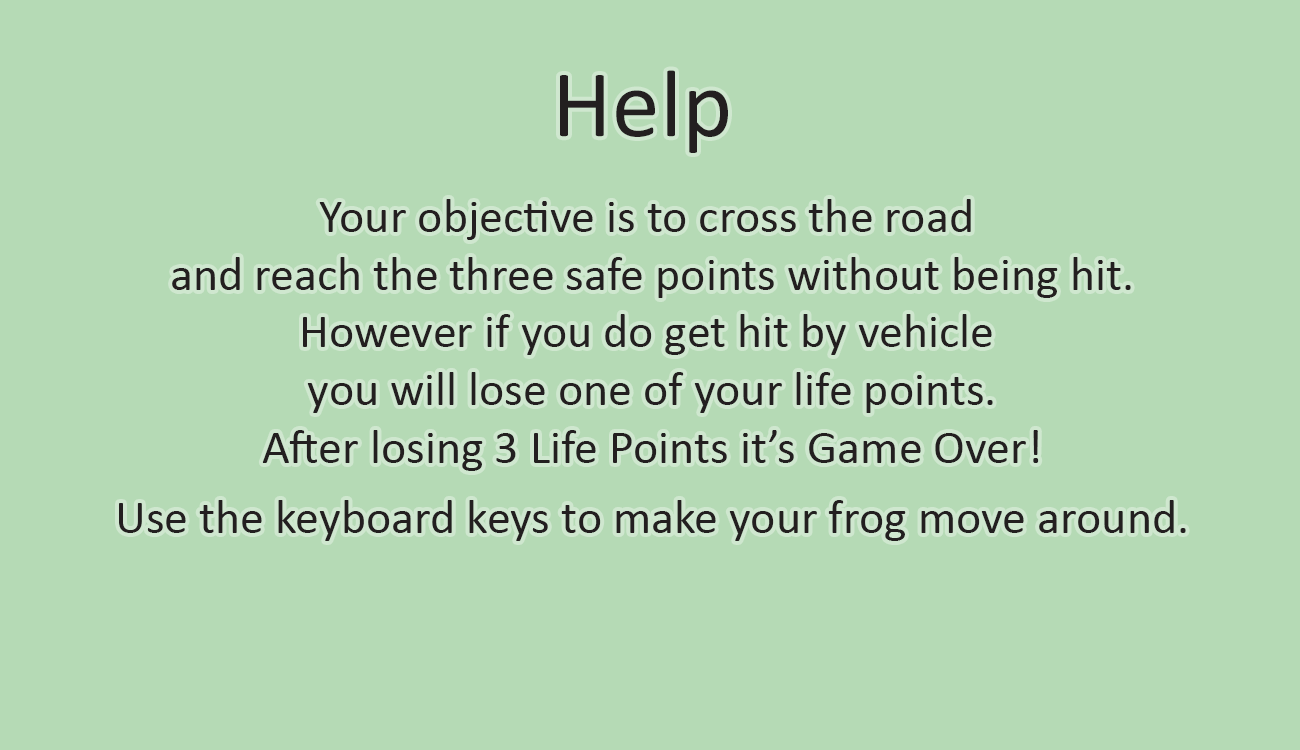
<style>
.page{position:relative;width:1300px;height:750px;background:#b5dab5}
.page>*{position:absolute;margin:0}
.t1{font:96.2px "Calibri";color:#231f20}
.t2{font:48px "Calibri";color:#231f20}
</style>
<div class="page">
<p class="t1" style="left:560px;top:70px;width:168px;height:83px">Help</p>
<p class="t2" style="left:172px;top:199px;width:959px;height:272px;text-align:center">Your objective is to cross the road <br>and reach the three safe points without being hit.<br>However if you do get hit by vehicle <br>you will lose one of your life points.<br>After losing 3 Life Points it’s Game Over!</p>
<p class="t2" style="left:119px;top:500px;width:1067px;height:41px">Use the keyboard keys to make your frog move around.</p>
</div>
